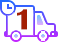
<style>
.page{position:relative;width:58px;height:42px;background:#ffffff}
.page>*{position:absolute;margin:0}
.t1{font:30px "BritannicBold";color:#a31f04}
</style>
<div class="page">
<p class="t1" style="left:17px;top:9px;width:10px;height:21px">1</p>
</div>
